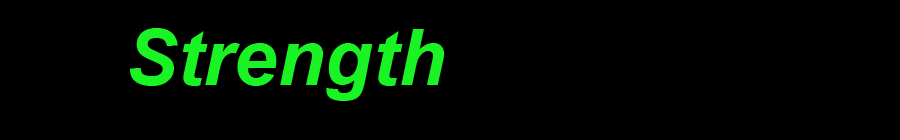
<style>
.page{position:relative;width:900px;height:140px;background:#000000}
.page>*{position:absolute;margin:0}
.t1{font:78px "Arial-BoldItalicMT";color:#1af324}
</style>
<div class="page">
<p class="t1" style="left:130px;top:28px;width:315px;height:73px">Strength</p>
</div>
